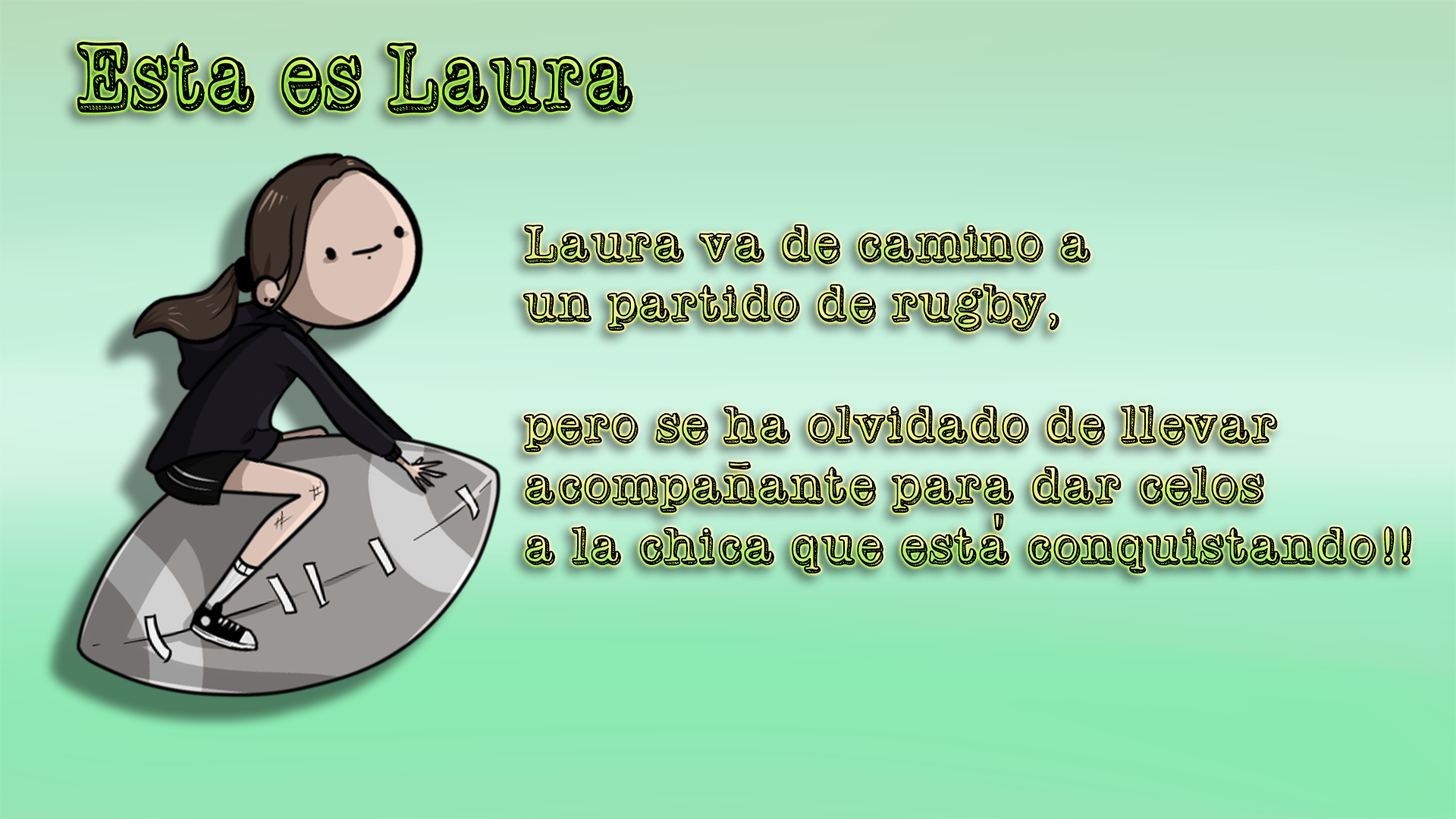
<style>
.page{position:relative;width:1456px;height:819px}
.page>*{position:absolute;margin:0}
.t1{font:22.2px "VintageOne";color:#000000;scale:0.84 1}
.t2{font:50.6px "VintageOne";color:#000000}
</style>
<div class="page">
<p class="t1" style="left:77px;top:42px;width:556px;height:73px">Esta es Laura</p>
<p class="t2" style="left:522px;top:224px;width:890px;height:350px">Laura va de camino a <br>un partido de rugby, <br><br>pero se ha olvidado de llevar <br>acompanante para dar celos <br>a la chica que esta conquistando!!</p>
</div>
